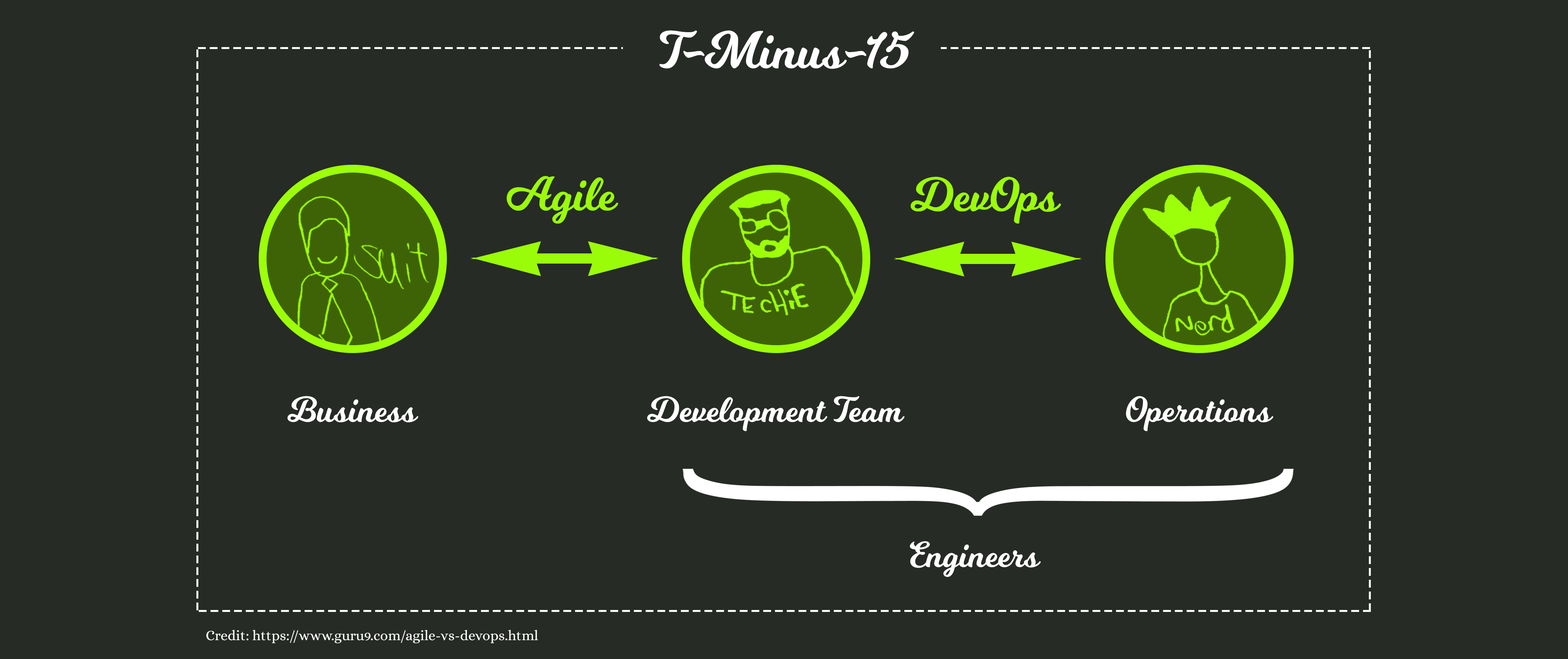
<style>
.page{position:relative;width:1568px;height:659px;background:#262b25}
.page>*{position:absolute;margin:0}
.t1{font:51.4px "Milkshake";color:#ffffff}
.t2{font:47px "Milkshake";color:#9bfc0a}
.t3{font:35.3px "Milkshake";color:#ffffff}
.t4{font:14.1px "Alice-Regular";color:#ffffff}
</style>
<div class="page">
<p class="t1" style="left:659px;top:30px;width:255px;height:39px">T-Minus-15</p>
<p class="t2" style="left:506px;top:176px;width:112px;height:47px">Agile</p>
<p class="t2" style="left:911px;top:176px;width:150px;height:47px">DevOps</p>
<p class="t3" style="left:287px;top:396px;width:131px;height:26px">Business</p>
<p class="t3" style="left:647px;top:396px;width:258px;height:35px">Development Team</p>
<p class="t3" style="left:1126px;top:396px;width:147px;height:35px">Operations</p>
<p class="t3" style="left:910px;top:541px;width:131px;height:36px">Engineers</p>
<p class="t4" style="left:206px;top:629px;width:332px;height:14px">Credit: https://www.guru9.com/agile-vs-devops.html</p>
</div>
